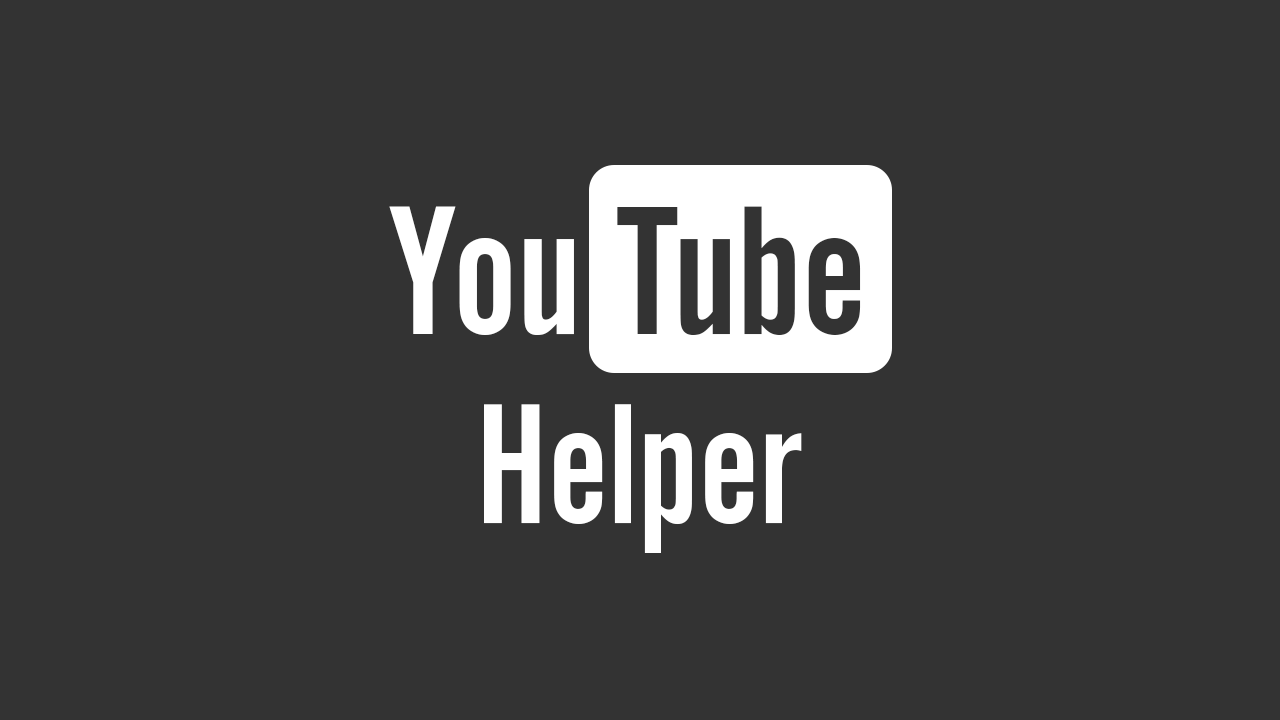
<style>
.page{position:relative;width:1280px;height:720px;background:#333333}
.page>*{position:absolute;margin:0}
.t1{font:191.5px "AlternateGotNo2D";color:#fefefe}
.t2{font:191.5px "AlternateGotNo2D";color:#333333}
.t3{font:178.4px "AlternateGotNo2D";color:#ffffff}
</style>
<div class="page">
<p class="t1" style="left:389px;top:206px;width:185px;height:129px">You</p>
<p class="t2" style="left:617px;top:206px;width:244px;height:129px">Tube</p>
<p class="t3" style="left:484px;top:404px;width:318px;height:149px">Helper</p>
</div>
